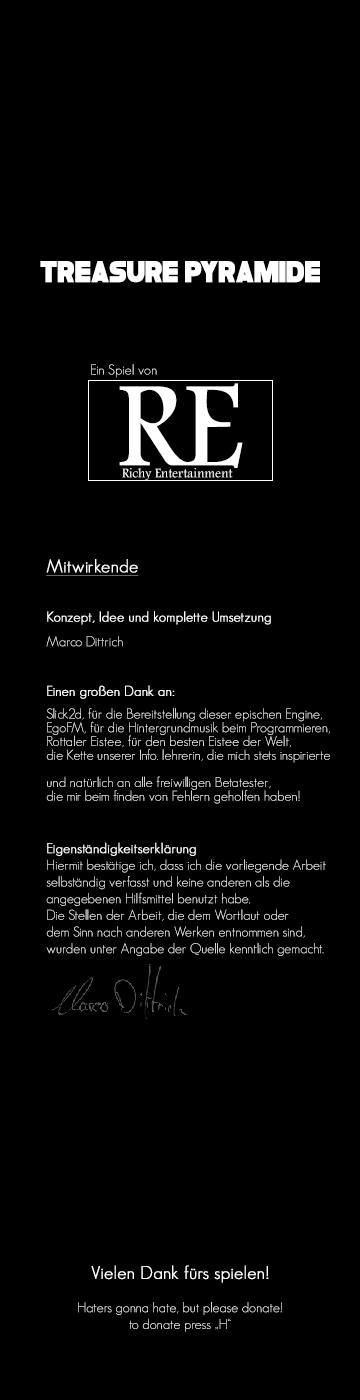
<style>
.page{position:relative;width:360px;height:1400px;background:#000000}
.page>*{position:absolute;margin:0}
.t1{font:31.1px "Folklore";letter-spacing:-0.01em;color:#ffffff;text-transform:uppercase;scale:0.83 1}
.t2{font:14px/16px "GeosansLight";color:#ffffff}
.t3{font:14px/24px "GeosansLight";color:#ffffff}
.t4{font:18px/24px "GeosansLight";color:#ffffff;font-weight:bold;text-decoration:underline}
.t5{font:14px/24px "GeosansLight";color:#ffffff;font-weight:bold}
.t6{font:14px/22px "GeosansLight";color:#ffffff}
.t7{font:14px/13px "GeosansLight";color:#ffffff}
.t8{font:125.8px "FootlightMTLight";letter-spacing:-0.01em;color:#ffffff}
.t9{font:13.6px "FootlightMTLight";letter-spacing:-0.01em;color:#ffffff}
.t10{font:18px/16px "GeosansLight";color:#ffffff;font-weight:bold}
</style>
<div class="page">
<p class="t1" style="left:40px;top:261px;width:280px;height:22px">Treasure PyramidE</p>
<p class="t2" style="left:46px;top:364px;width:284px;height:592px"><span class="t3">Ein Spiel von<br><br><br><br><br><br><br><br></span><span class="t4">Mitwirkende<br></span><span class="t5"><br>Konzept, Idee und komplette Umsetzung<br></span><span class="t3">Marco Dittrich<br></span><span class="t5"><br>Einen großen Dank an:<br></span><span class="t6">Slick2d, für die Bereitstellung dieser epischen Engine,<br></span><span class="t7">EgoFM, für die Hintergrundmusik beim Programmieren,<br>Rottaler Eistee, für den besten Eistee der Welt,<br>die Kette unserer Info. lehrerin, die mich stets inspirierte<br><br>und natürlich an alle freiwilligen Betatester,<br>die mir beim finden von Fehlern geholfen haben!<br><br><br></span><span class="t5">Eigenständigkeitserklärung<br></span>Hiermit bestätige ich, dass ich die vorliegende Arbeit<br>selbständig verfasst und keine anderen als die<br>angegebenen Hilfsmittel benutzt habe.<br>Die Stellen der Arbeit, die dem Wortlaut oder<br>dem Sinn nach anderen Werken entnommen sind,<br>wurden unter Angabe der Quelle kenntlich gemacht.</p>
<p class="t8" style="left:119px;top:383px;width:124px;height:85px">RE</p>
<p class="t9" style="left:122px;top:468px;width:111px;height:13px">Richy Entertainment</p>
<p class="t2" style="left:78px;top:1265px;width:204px;height:67px;text-align:center"><span class="t10">Vielen Dank fürs spielen!<br><br></span>Haters gonna hate, but please donate!<br>to donate press „H“</p>
</div>
